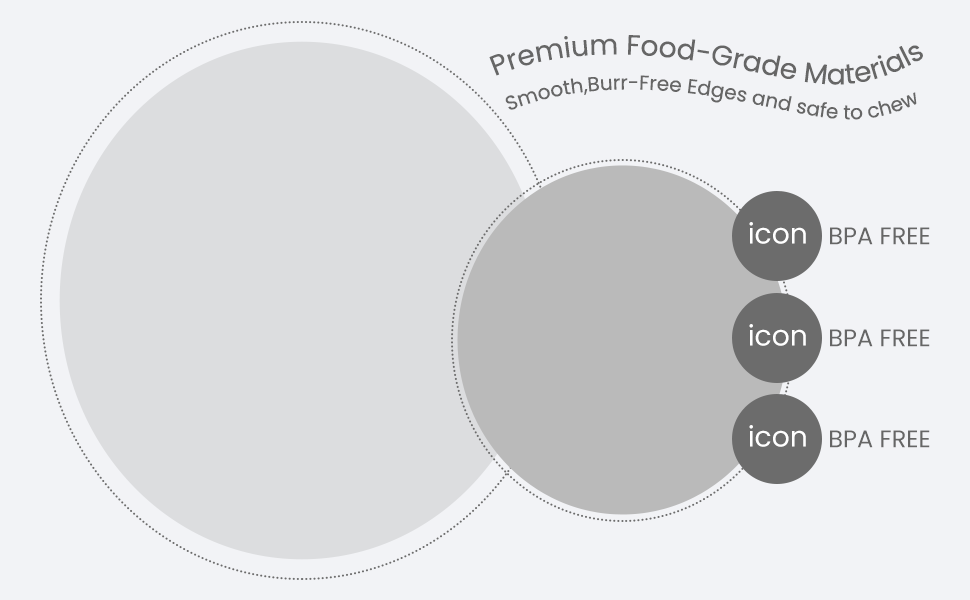
<style>
.page{position:relative;width:970px;height:600px;background:#f2f3f6}
.page>*{position:absolute;margin:0}
.t1{font:28px "Poppins-Regular";color:#666666}
.t2{font:20px "Poppins-Regular";color:#666666}
.t3{font:28.1px "Poppins-Regular";color:#ffffff}
.t4{font:24px "Poppins-Regular";color:#666666}
</style>
<div class="page">
<p class="t1" style="left:489px;top:35px;width:434px;height:50px;rotate:-4deg">Premium Food-Grade Materials</p>
<p class="t2" style="left:505px;top:75px;width:412px;height:45px;rotate:-4deg">Smooth,Burr-Free Edges and safe to chew</p>
<p class="t3" style="left:749px;top:222px;width:57px;height:22px">icon</p>
<p class="t4" style="left:830px;top:227px;width:100px;height:18px">BPA FREE</p>
<p class="t3" style="left:749px;top:324px;width:57px;height:22px">icon</p>
<p class="t4" style="left:830px;top:329px;width:100px;height:18px">BPA FREE</p>
<p class="t3" style="left:749px;top:425px;width:57px;height:22px">icon</p>
<p class="t4" style="left:830px;top:430px;width:100px;height:18px">BPA FREE</p>
</div>
